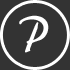
<style>
.page{position:relative;width:70px;height:70px;background:#333333}
.page>*{position:absolute;margin:0}
.t1{font:38px "VNT-Brush";color:#ffffff}
</style>
<div class="page">
<p class="t1" style="left:19px;top:15px;width:30px;height:38px">P</p>
</div>
